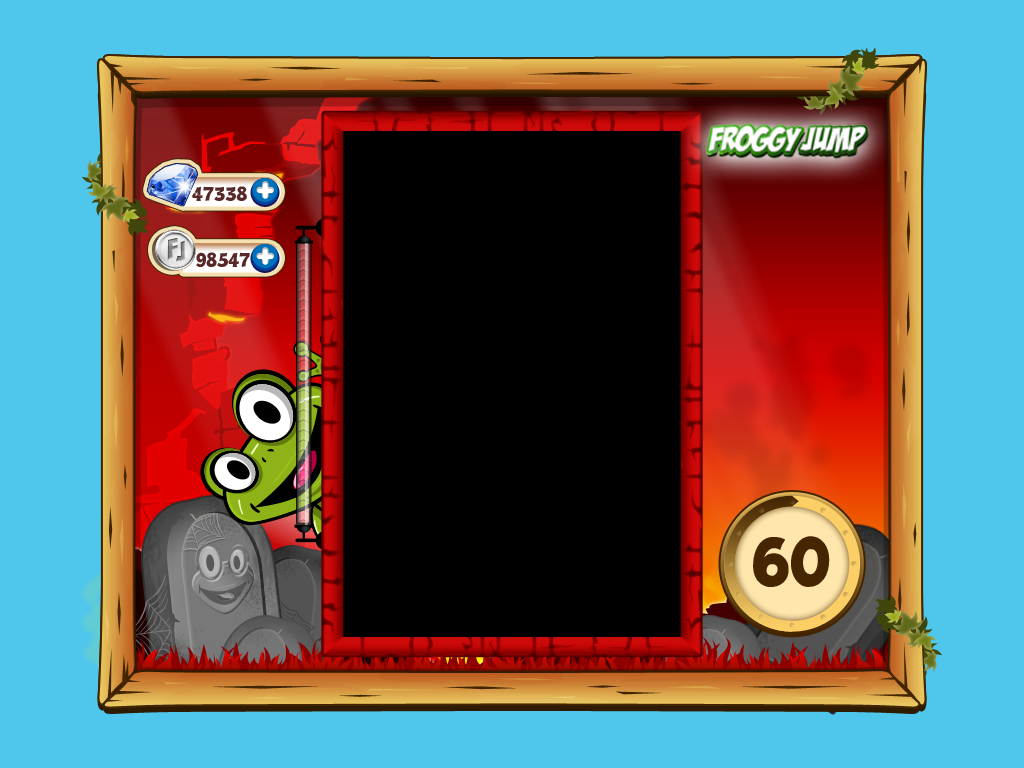
<style>
.page{position:relative;width:1024px;height:768px;background:#4fc6ec}
.page>*{position:absolute;margin:0}
.t1{font:17px "BDCartoonShout";color:#582828}
.t2{font:60px "BDCartoonShout";color:#462602}
</style>
<div class="page">
<p class="t1" style="left:192px;top:186px;width:55px;height:15px">47338</p>
<p class="t1" style="left:196px;top:252px;width:54px;height:15px">98547</p>
<p class="t2" style="left:753px;top:536px;width:77px;height:51px">60</p>
</div>
